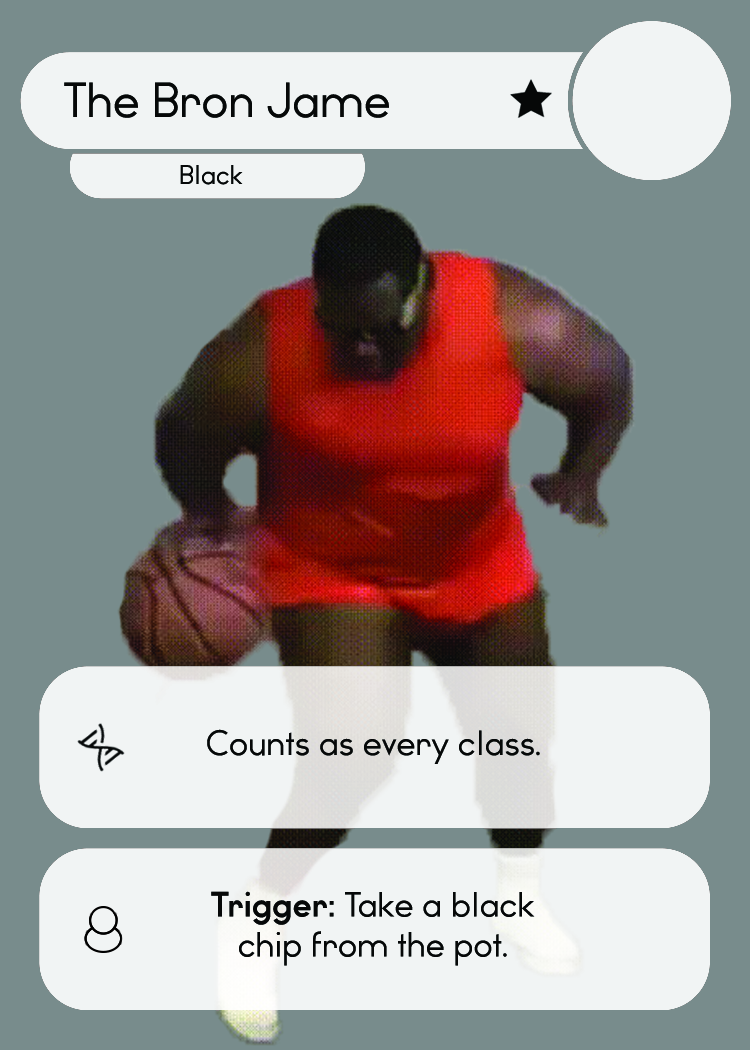
<style>
.page{position:relative;width:750px;height:1050px;background:#788c8c}
.page>*{position:absolute;margin:0}
.t1{font:46.7px "WatchwordRegularDemo";color:#060808}
.t2{font:25.5px "WatchwordRegularDemo";color:#060808}
.t3{font:33.3px "WatchwordRegularDemo";color:#060808}
.t4{font:33.3px "Dosis-Medium";color:#060808}
.t5{font:33.3px "WatchwordBoldDemo";color:#060808}
</style>
<div class="page">
<p class="t1" style="left:64px;top:82px;width:325px;height:36px">The Bron Jame</p>
<p class="t2" style="left:180px;top:165px;width:63px;height:20px">Black</p>
<p class="t3" style="left:207px;top:729px;width:333px;height:35px">Counts as every class<span class="t4">.</span></p>
<p class="t3" style="left:211px;top:891px;width:324px;height:75px;text-align:center"><span class="t5">Trigger: </span>Take a black<br>chip from the pot<span class="t4">.</span></p>
</div>
